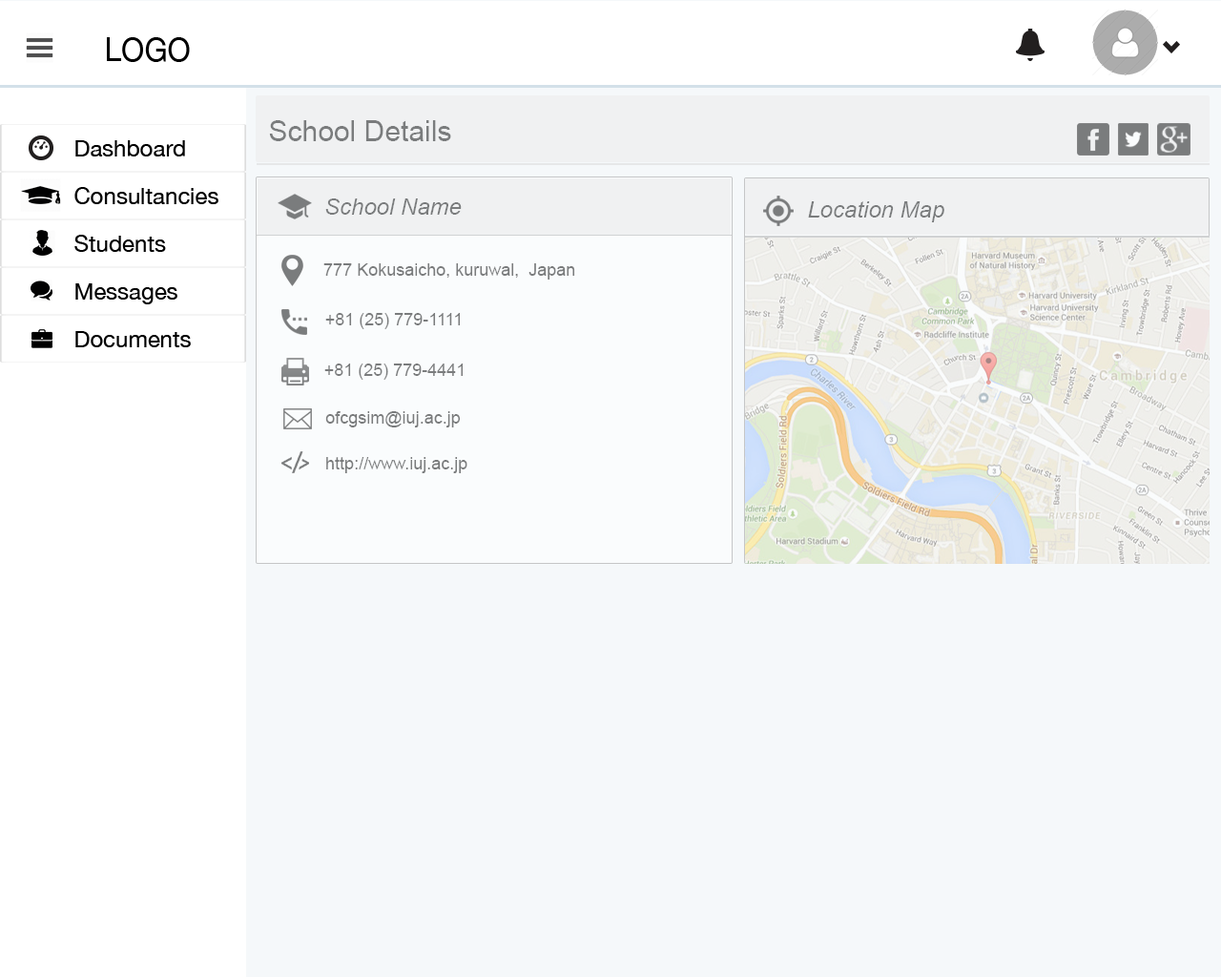
<style>
.page{position:relative;width:1221px;height:977px;background:#f5f8fa}
.page>*{position:absolute;margin:0}
.t1{font:32.7px "HelveticaNeue";color:#000000;scale:0.93 1}
.t2{font:28.6px "ArialMT";color:#7a7c7d}
.t3{font:22.9px "HelveticaNeue";color:#000000}
.t4{font:22.9px "Arial-ItalicMT";color:#7a7c7d}
.t5{font:17.2px "ArialMT";color:#7a7c7d}
</style>
<div class="page">
<p class="t1" style="left:107px;top:37px;width:83px;height:25px">LOGO</p>
<p class="t2" style="left:269px;top:120px;width:182px;height:21px">School Details</p>
<p class="t3" style="left:75px;top:140px;width:110px;height:16px">Dashboard</p>
<p class="t3" style="left:74px;top:187px;width:144px;height:17px">Consultancies</p>
<p class="t4" style="left:325px;top:198px;width:137px;height:17px">School Name</p>
<p class="t4" style="left:808px;top:201px;width:136px;height:21px">Location Map</p>
<p class="t3" style="left:74px;top:235px;width:92px;height:17px">Students</p>
<p class="t5" style="left:323px;top:263px;width:252px;height:16px">777 Kokusaicho, kuruwal,  Japan</p>
<p class="t3" style="left:75px;top:283px;width:102px;height:21px">Messages</p>
<p class="t5" style="left:325px;top:313px;width:136px;height:16px">+81 (25) 779-1111</p>
<p class="t3" style="left:75px;top:331px;width:116px;height:16px">Documents</p>
<p class="t5" style="left:324px;top:363px;width:140px;height:17px">+81 (25) 779-4441</p>
<p class="t5" style="left:325px;top:411px;width:136px;height:16px">ofcgsim@iuj.ac.jp</p>
<p class="t5" style="left:326px;top:457px;width:141px;height:16px">http://www.iuj.ac.jp</p>
</div>
